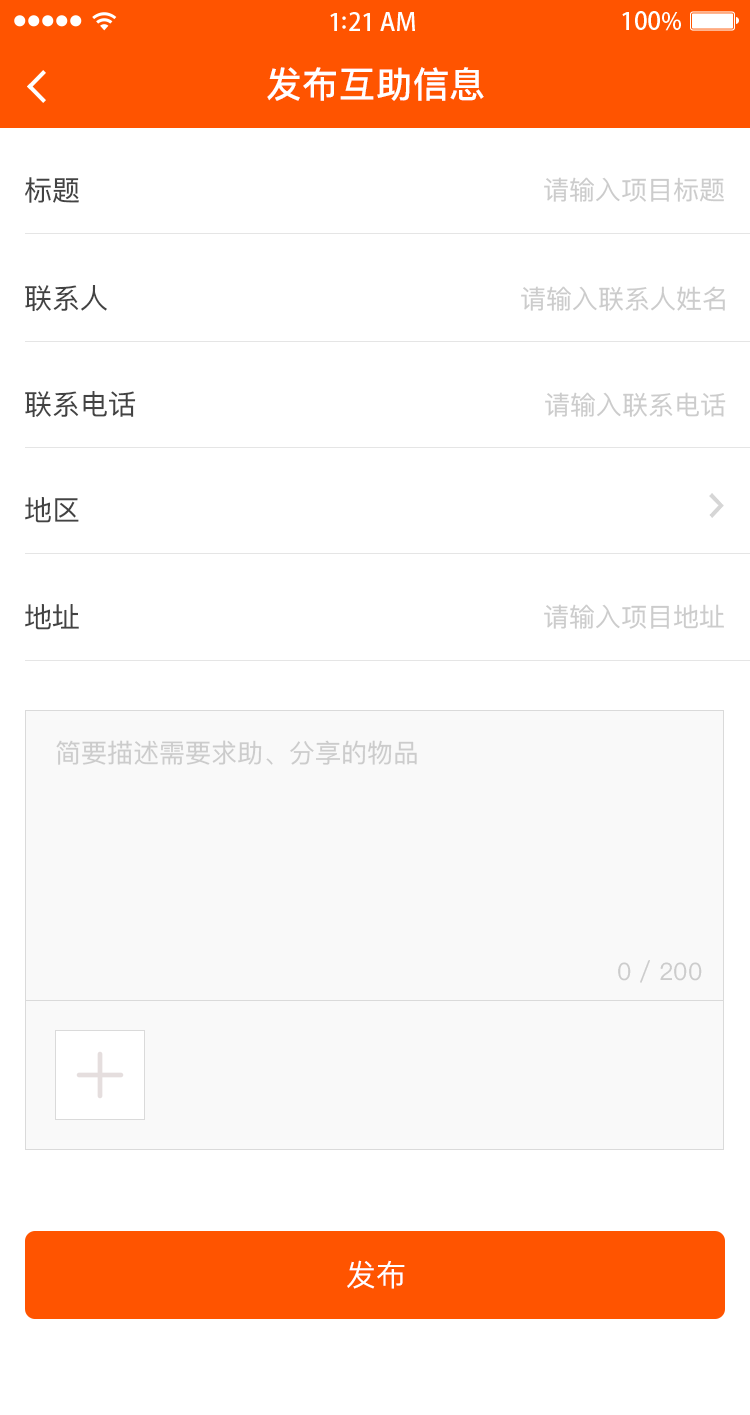
<style>
.page{position:relative;width:750px;height:1415px;background:#ffffff}
.page>*{position:absolute;margin:0}
.t1{font:36px "PingFangSC-Medium";letter-spacing:0.02em;color:#ffffff}
.t2{font:28px "PingFangSC-Regular";color:#434343}
.t3{font:26px "PingFangSC-Regular";color:#cccccc}
.t4{font:24px "PingFangSC-Regular";color:#cccccc}
.t5{font:30px "PingFangSC-Regular";color:#ffffff;text-transform:uppercase}
</style>
<div class="page">
<p class="t1" style="left:267px;top:67px;width:217px;height:34px">发布互助信息</p>
<p class="t2" style="left:25px;top:177px;width:54px;height:26px">标题</p>
<p class="t3" style="left:544px;top:177px;width:180px;height:25px">请输入项目标题</p>
<p class="t2" style="left:25px;top:285px;width:82px;height:27px">联系人</p>
<p class="t3" style="left:521px;top:286px;width:204px;height:25px">请输入联系人姓名</p>
<p class="t2" style="left:25px;top:391px;width:111px;height:27px">联系电话</p>
<p class="t3" style="left:545px;top:392px;width:181px;height:25px">请输入联系电话</p>
<p class="t2" style="left:25px;top:497px;width:54px;height:26px">地区</p>
<p class="t2" style="left:25px;top:604px;width:54px;height:26px">地址</p>
<p class="t3" style="left:544px;top:604px;width:180px;height:25px">请输入项目地址</p>
<p class="t3" style="left:56px;top:740px;width:361px;height:25px">简要描述需要求助、分享的物品</p>
<p class="t4" style="left:618px;top:960px;width:84px;height:23px">0 / 200</p>
<p class="t5" style="left:347px;top:1260px;width:58px;height:29px">发布</p>
</div>
